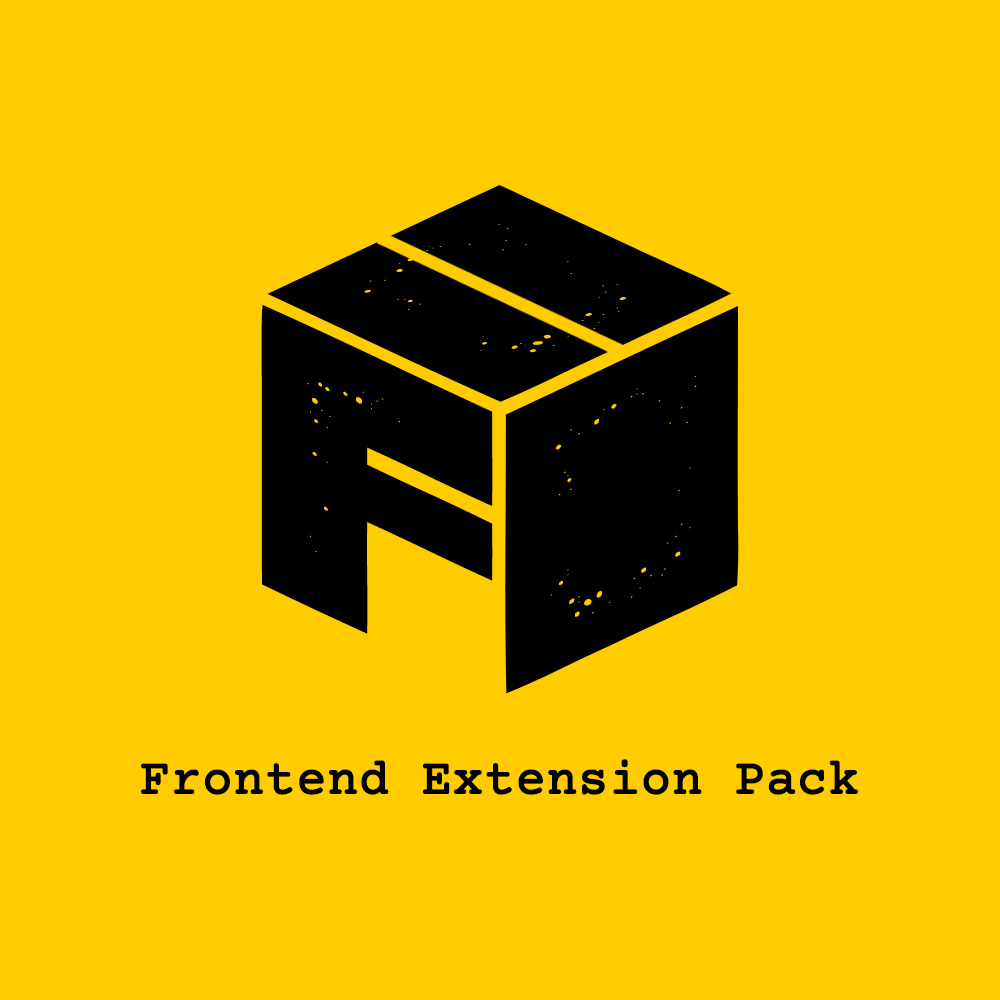
<style>
.page{position:relative;width:1000px;height:1000px;background:#ffcc00}
.page>*{position:absolute;margin:0}
.t1{font:402.9px "ManiacGrunged-Regular";color:#000000;scale:1.24 1}
.t2{font:50px "CourierPrime-Regular";color:#000000;font-weight:bold}
</style>
<div class="page">
<p class="t1" style="left:261px;top:304px;width:232px;height:330px;rotate:25deg">F</p>
<p class="t2" style="left:141px;top:759px;width:717px;height:36px">Frontend Extension Pack</p>
</div>
